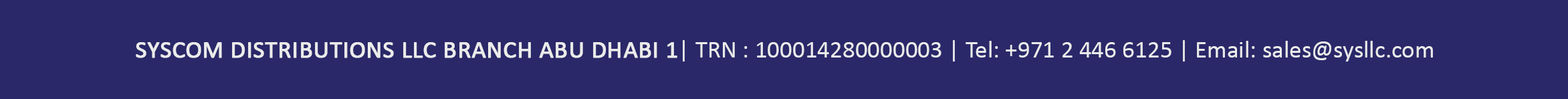
<style>
.page{position:relative;width:1568px;height:99px;background:#2a2869}
.page>*{position:absolute;margin:0}
.t1{font:24.7px "Calibri";color:#eaeaea}
.t2{font:24.7px "Calibri";color:#eaeaea;text-transform:uppercase;font-weight:bold}
</style>
<div class="page">
<p class="t1" style="left:136px;top:40px;width:1297px;height:22px"><span class="t2">SYSCOM DISTRIBUTIONS LLC BRANCH ABU DHABI 1</span>| TRN : 100014280000003 | Tel: +971 2 446 6125 | Email: sales@sysllc.com</p>
</div>
